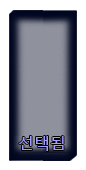
<style>
.page{position:relative;width:86px;height:170px;background:#ffffff}
.page>*{position:absolute;margin:0}
.t1{font:16px "MalgunGothicRegular";color:#a59afe}
</style>
<div class="page">
<p class="t1" style="left:19px;top:136px;width:45px;height:15px">선택됨</p>
</div>
